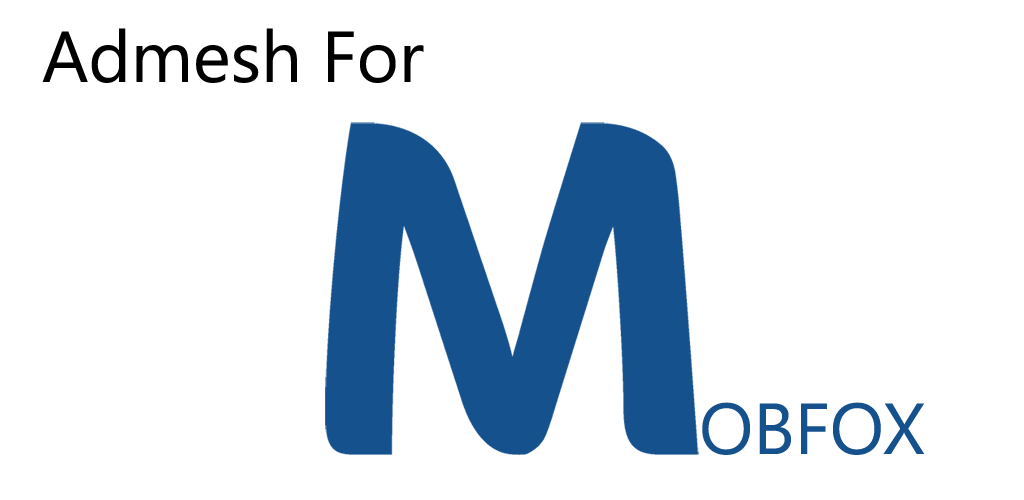
<style>
.page{position:relative;width:1024px;height:500px;background:#ffffff}
.page>*{position:absolute;margin:0}
.t1{font:72px "SegoeWP";color:#000000}
.t2{font:72px "SegoeWP";color:#15518d}
</style>
<div class="page">
<p class="t1" style="left:42px;top:28px;width:382px;height:55px">Admesh For</p>
<p class="t2" style="left:702px;top:402px;width:223px;height:53px">OBFOX</p>
</div>
